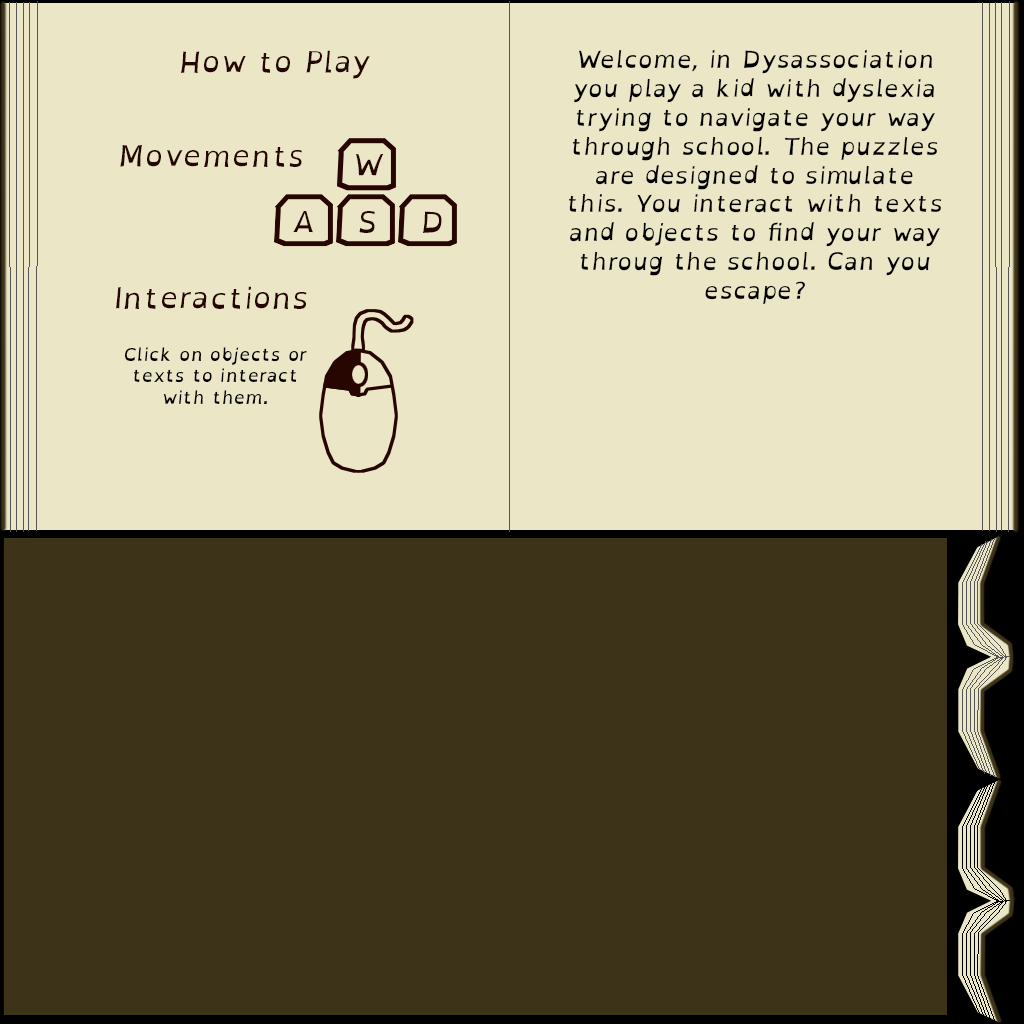
<style>
.page{position:relative;width:1024px;height:1024px;background:#ebe6c6}
.page>*{position:absolute;margin:0}
.t1{font:30px "OpenDyslexic-Italic";color:#260601}
.t2{font:24px "OpenDyslexic-Italic";color:#000000}
.t3{font:18px "OpenDyslexic-Italic";color:#000000}
</style>
<div class="page">
<p class="t1" style="left:181px;top:50px;width:189px;height:29px">How to Play</p>
<p class="t2" style="left:569px;top:49px;width:373px;height:255px;text-align:center">Welcome, in Dysassociation you play a kid with dyslexia trying to navigate your way through school. The puzzles are designed to simulate this. You interact with texts and objects to find your way throug the school. Can you escape?</p>
<p class="t1" style="left:120px;top:145px;width:182px;height:22px">Movements</p>
<p class="t1" style="left:356px;top:154px;width:28px;height:22px">W</p>
<p class="t1" style="left:293px;top:211px;width:20px;height:22px">A</p>
<p class="t1" style="left:359px;top:211px;width:16px;height:22px">S</p>
<p class="t1" style="left:423px;top:211px;width:19px;height:22px">D</p>
<p class="t1" style="left:116px;top:286px;width:191px;height:23px">Interactions</p>
<p class="t3" style="left:125px;top:347px;width:182px;height:57px;text-align:center">Click on objects or texts to interact with them.</p>
</div>
